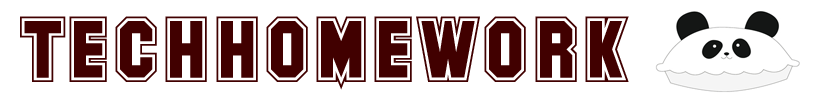
<style>
.page{position:relative;width:827px;height:100px;background:#ffffff}
.page>*{position:absolute;margin:0}
.t1{font:89.7px "SFCollegiate";color:#410000}
</style>
<div class="page">
<p class="t1" style="left:20px;top:16px;width:609px;height:74px">techhomework</p>
</div>
